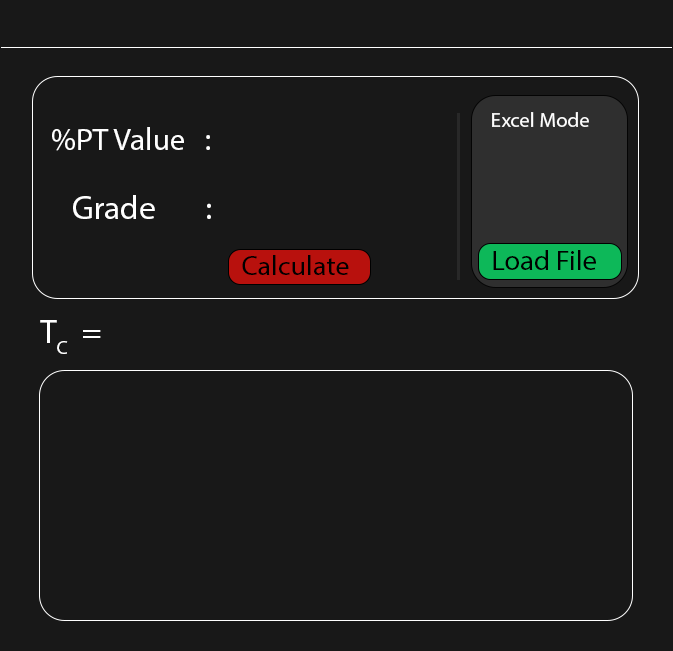
<style>
.page{position:relative;width:673px;height:651px;background:#181818}
.page>*{position:absolute;margin:0}
.t1{font:20.7px "MyriadPro-Regular";color:#ffffff}
.t2{font:31.3px "MyriadPro-Regular";color:#ffffff}
.t3{font:33.3px "MyriadPro-Regular";color:#ffffff}
.t4{font:27px "MyriadPro-Regular";color:#000000;scale:1.05 1}
.t5{font:27.8px "MyriadPro-Regular";color:#000000}
.t6{font:33.3px "MyriadPro-Regular";color:#ffffff;font-variant:small-caps}
</style>
<div class="page">
<p class="t1" style="left:492px;top:112px;width:97px;height:15px">Excel Mode</p>
<p class="t2" style="left:52px;top:127px;width:158px;height:24px">%PT Value   :</p>
<p class="t3" style="left:73px;top:195px;width:138px;height:24px">Grade       :</p>
<p class="t4" style="left:242px;top:255px;width:107px;height:20px">Calculate</p>
<p class="t5" style="left:493px;top:250px;width:103px;height:20px">Load File</p>
<p class="t3" style="left:40px;top:320px;width:61px;height:34px">T<span class="t6">C</span>  =</p>
</div>
